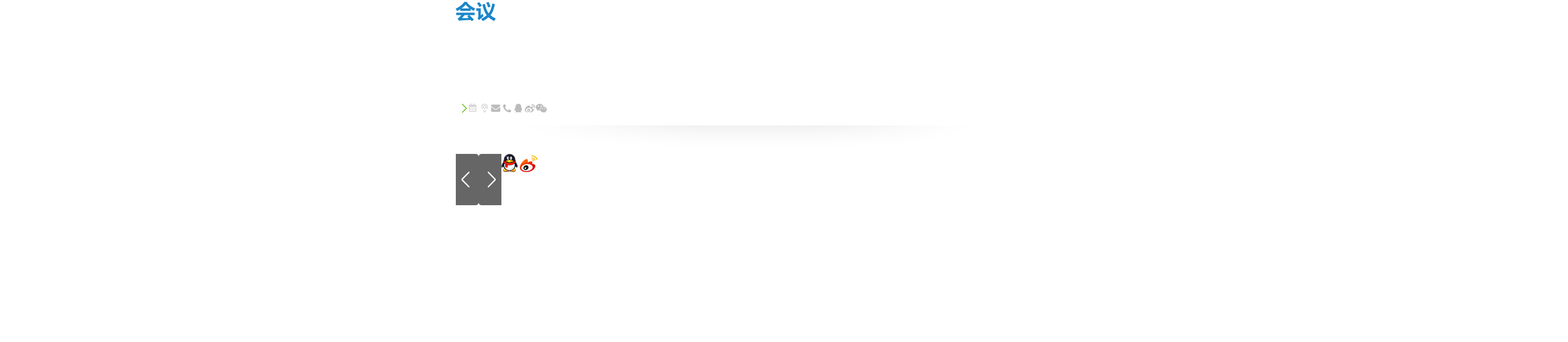
<style>
.page{position:relative;width:1568px;height:342px;background:#ffffff}
.page>*{position:absolute;margin:0}
.t1{font:20.5px "FZLTCHK--GBK1-0";color:#1b86c9;text-transform:uppercase}
</style>
<div class="page">
<p class="t1" style="left:455px;top:2px;width:41px;height:19px">会议</p>
</div>
